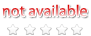
<style>
.page{position:relative;width:91px;height:36px;background:#ffffff}
.page>*{position:absolute;margin:0}
.t1{font:16px "MyriadPro-Regular"}
</style>
<div class="page">
<p class="t1" style="left:2px;top:4px;width:85px;height:13px">not available</p>
</div>
